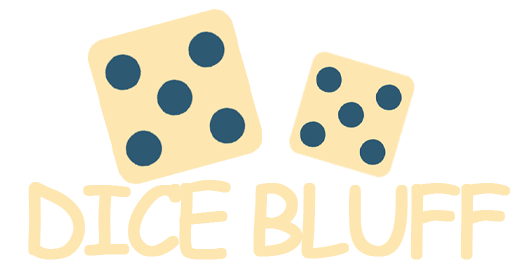
<style>
.page{position:relative;width:524px;height:269px;background:#ffffff}
.page>*{position:absolute;margin:0}
.t1{font:93px "ComicSansMS";letter-spacing:-0.1em;color:#fde6b0;font-weight:bold}
</style>
<div class="page">
<p class="t1" style="left:28px;top:180px;width:483px;height:80px">DICE BLUFF</p>
</div>
